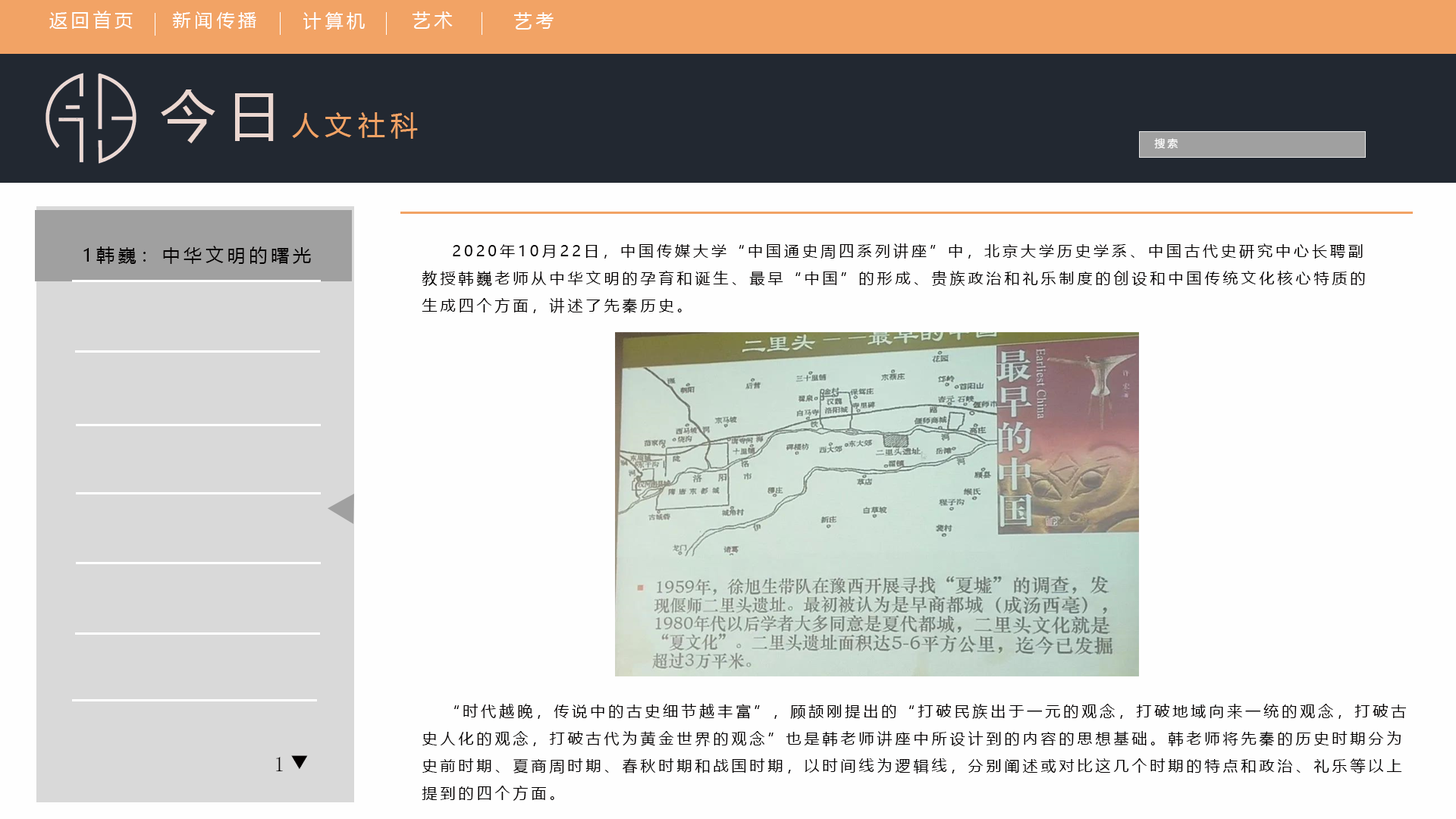
<style>
.page{position:relative;width:1456px;height:819px;background:#fefefe}
.page>*{position:absolute;margin:0}
.t1{font:18.2px "MicrosoftYaHei";letter-spacing:0.2em;color:#ffffff}
.t2{font:27.3px "MicrosoftYaHei";letter-spacing:0.2em;color:#f2a365}
.t3{font:54.6px "MicrosoftYaHei";letter-spacing:0.2em;color:#ebd7d0}
.t4{font:10.6px "MicrosoftYaHei";letter-spacing:0.2em;color:#ffffff}
.t5{font:18.2px "MicrosoftYaHei";letter-spacing:0.2em;color:#030000}
.t6{font:15.2px/27.3px "MicrosoftYaHei";letter-spacing:0.2em;color:#030000}
.t7{font:21.2px "FangSong";letter-spacing:0.2em;color:#030000}
</style>
<div class="page">
<p class="t1" style="left:49px;top:11px;width:84px;height:18px">返回首页</p>
<p class="t1" style="left:172px;top:11px;width:84px;height:18px">新闻传播</p>
<p class="t1" style="left:303px;top:12px;width:62px;height:18px">计算机</p>
<p class="t1" style="left:413px;top:11px;width:40px;height:18px">艺术</p>
<p class="t1" style="left:514px;top:12px;width:40px;height:18px">艺考</p>
<p class="t2" style="left:161px;top:89px;width:257px;height:54px"><span class="t3">今日</span>人文社科</p>
<p class="t4" style="left:1154px;top:138px;width:24px;height:11px">搜索</p>
<p class="t5" style="left:83px;top:246px;width:228px;height:18px">1韩巍：中华文明的曙光</p>
<p class="t6" style="left:422px;top:243px;width:943px;height:70px">2020年10月22日，中国传媒大学“中国通史周四系列讲座”中，北京大学历史学系、中国古代史研究中心长聘副<br>教授韩巍老师从中华文明的孕育和诞生、最早“中国”的形成、贵族政治和礼乐制度的创设和中国传统文化核心特质的<br>生成四个方面，讲述了先秦历史。</p>
<p class="t6" style="left:422px;top:704px;width:985px;height:97px">“时代越晚，传说中的古史细节越丰富”，顾颉刚提出的“打破民族出于一元的观念，打破地域向来一统的观念，打破古<br>史人化的观念，打破古代为黄金世界的观念”也是韩老师讲座中所设计到的内容的思想基础。韩老师将先秦的历史时期分为<br>史前时期、夏商周时期、春秋时期和战国时期，以时间线为逻辑线，分别阐述或对比这几个时期的特点和政治、礼乐等以上<br>提到的四个方面。</p>
<p class="t7" style="left:276px;top:755px;width:32px;height:17px">1▼</p>
</div>
